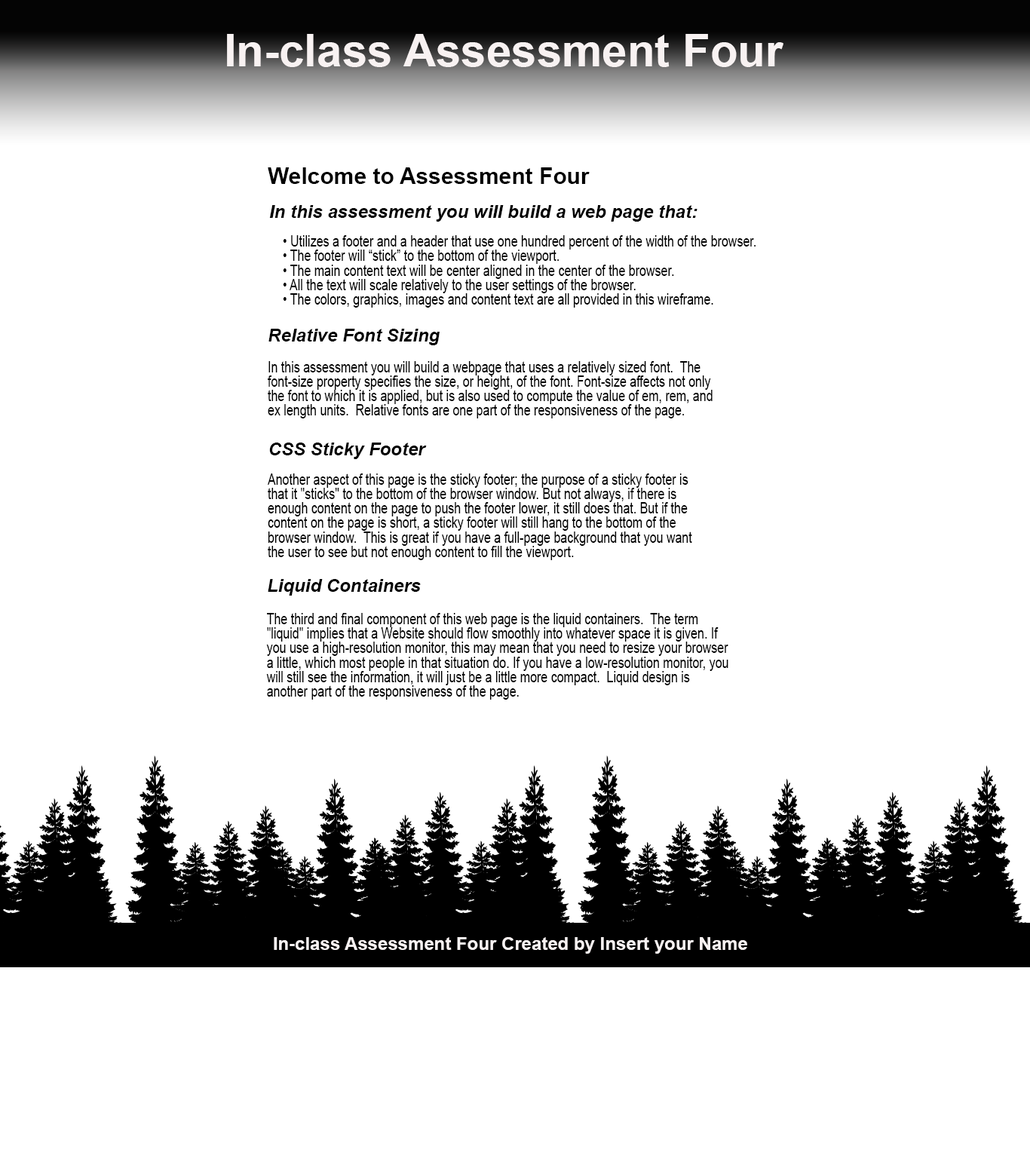
<style>
.page{position:relative;width:1030px;height:1158px;background:#ffffff}
.page>*{position:absolute;margin:0}
.t1{font:45.2px "Arial-BoldMT";color:#f8f2f2}
.t2{font:22.6px "Arial-BoldMT";color:#000000}
.t3{font:18.1px "Arial-BoldItalicMT";color:#000000}
.t4{font:15.1px "ArialMT";color:#000000;scale:0.8 1}
.t5{font:18.1px "Arial-BoldMT";color:#f8f2f2}
</style>
<div class="page">
<p class="t1" style="left:227px;top:34px;width:556px;height:33px">In-class Assessment Four</p>
<p class="t2" style="left:268px;top:167px;width:322px;height:17px">Welcome to Assessment Four</p>
<p class="t3" style="left:269px;top:205px;width:428px;height:17px">In this assessment you will build a web page that:</p>
<p class="t4" style="left:283px;top:235px;width:472px;height:73px">• Utilizes a footer and a header that use one hundred percent of the width of the browser.<br>• The footer will “stick” to the bottom of the viewport.<br>• The main content text will be center aligned in the center of the browser.<br>• All the text will scale relatively to the user settings of the browser.<br>• The colors, graphics, images and content text are all provided in this wireframe.</p>
<p class="t3" style="left:268px;top:329px;width:172px;height:16px">Relative Font Sizing</p>
<p class="t4" style="left:268px;top:361px;width:444px;height:57px">In this assessment you will build a webpage that uses a relatively sized font.  The font-size property specifies the size, or height, of the font. Font-size affects not only the font to which it is applied, but is also used to compute the value of em, rem, and ex length units.  Relative fonts are one part of the responsiveness of the page.</p>
<p class="t3" style="left:269px;top:443px;width:158px;height:16px">CSS Sticky Footer</p>
<p class="t4" style="left:268px;top:473px;width:424px;height:87px">Another aspect of this page is the sticky footer; the purpose of a sticky footer is that it "sticks" to the bottom of the browser window. But not always, if there is enough content on the page to push the footer lower, it still does that. But if the content on the page is short, a sticky footer will still hang to the bottom of the browser window.  This is great if you have a full-page background that you want the user to see but not enough content to fill the viewport.</p>
<p class="t3" style="left:268px;top:579px;width:153px;height:17px">Liquid Containers</p>
<p class="t4" style="left:266px;top:613px;width:462px;height:87px">The third and final component of this web page is the liquid containers.  The term "liquid" implies that a Website should flow smoothly into whatever space it is given. If you use a high-resolution monitor, this may mean that you need to resize your browser a little, which most people in that situation do. If you have a low-resolution monitor, you will still see the information, it will just be a little more compact.  Liquid design is another part of the responsiveness of the page.</p>
<p class="t5" style="left:274px;top:937px;width:473px;height:17px">In-class Assessment Four Created by Insert your Name</p>
</div>
